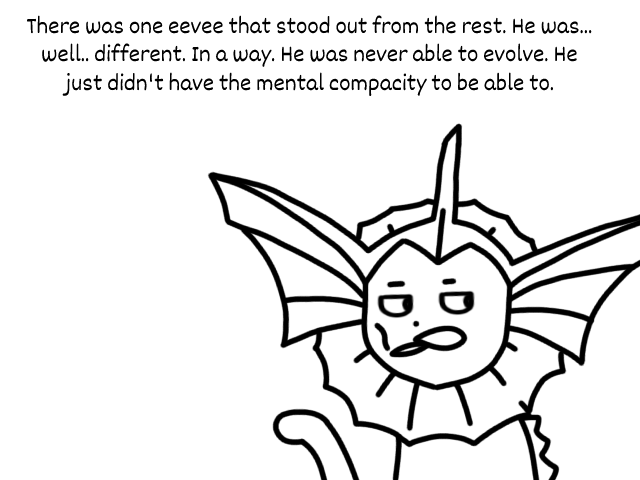
<style>
.page{position:relative;width:640px;height:480px;background:#ffffff}
.page>*{position:absolute;margin:0}
.t1{font:24px "Dekko";color:#000000}
</style>
<div class="page">
<p class="t1" style="left:26px;top:15px;width:566px;height:81px;text-align:center">There was one eevee that stood out from the rest. He was...<br>well.. different. In a way. He was never able to evolve. He<br>just didn't have the mental compacity to be able to.</p>
</div>
